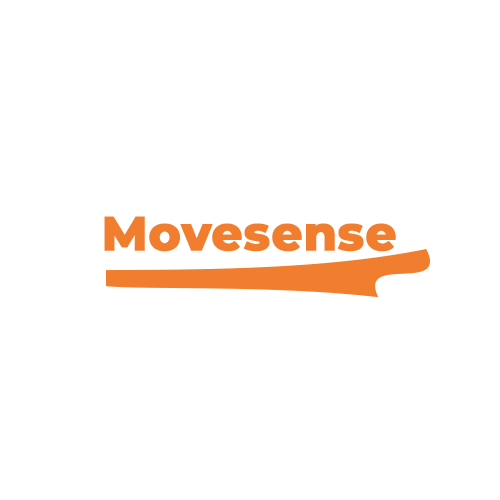
<style>
.page{position:relative;width:500px;height:500px;background:#ffffff}
.page>*{position:absolute;margin:0}
.t1{font:48px "Montserrat-ExtraBold";color:#f07e2e;font-weight:bold}
</style>
<div class="page">
<p class="t1" style="left:104px;top:216px;width:292px;height:36px">Movesense</p>
</div>
